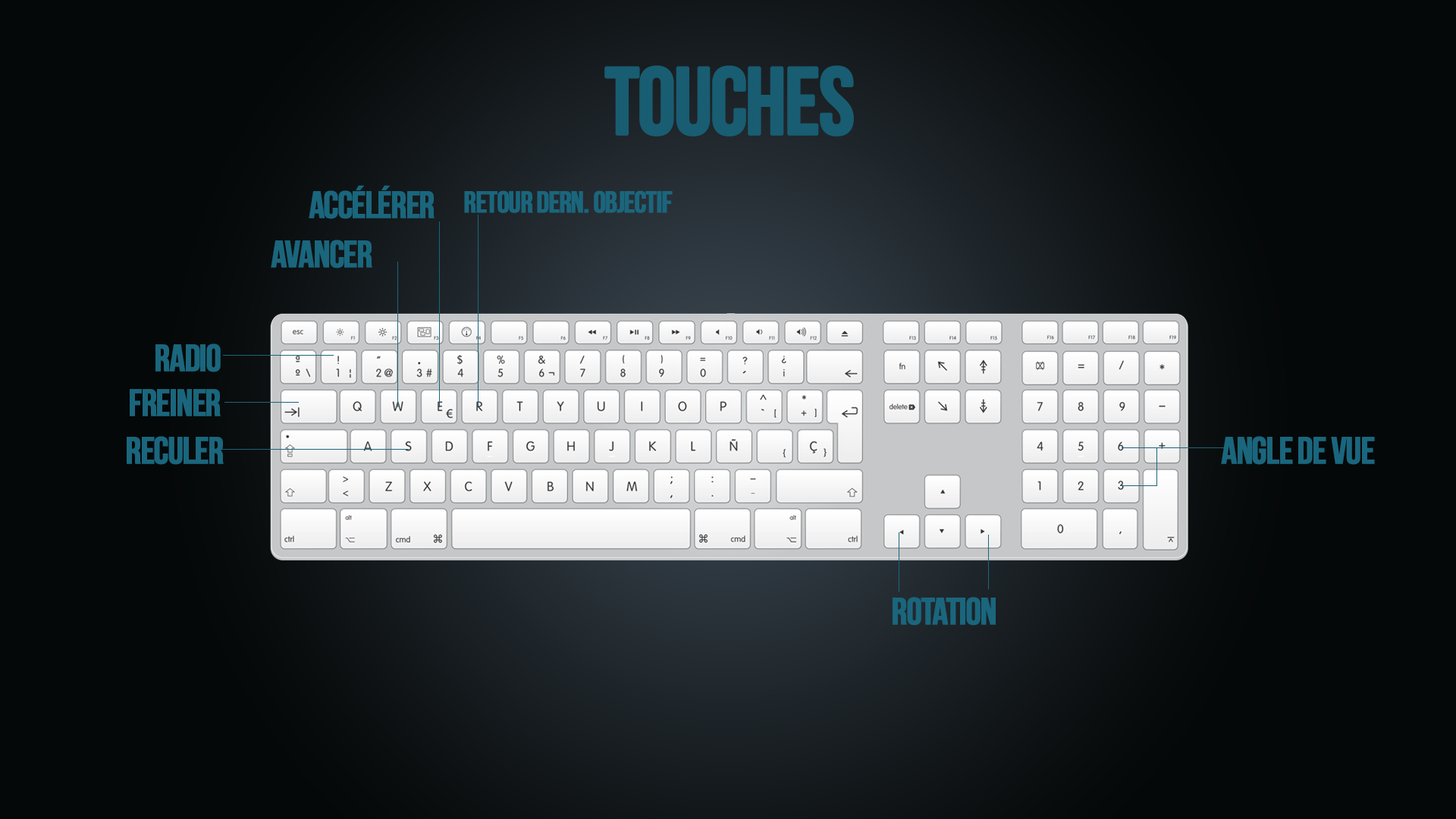
<style>
.page{position:relative;width:1456px;height:819px;background:#050809}
.page>*{position:absolute;margin:0}
.t1{font:95.1px "BebasNeue";letter-spacing:-0.04em;color:#185d72;font-weight:bold}
.t2{font:37.9px "BebasNeue";letter-spacing:-0.04em;color:#1a667d;font-weight:bold}
.t3{font:30.3px "BebasNeue";letter-spacing:-0.04em;color:#1a667d;font-weight:bold}
</style>
<div class="page">
<p class="t1" style="left:604px;top:65px;width:250px;height:71px">TOUCHES</p>
<p class="t2" style="left:309px;top:185px;width:126px;height:34px">Accélérer</p>
<p class="t3" style="left:464px;top:190px;width:209px;height:23px">Retour Dern. Objectif</p>
<p class="t2" style="left:271px;top:240px;width:101px;height:28px">Avancer</p>
<p class="t2" style="left:155px;top:344px;width:66px;height:28px">Radio</p>
<p class="t2" style="left:130px;top:389px;width:91px;height:27px">Freiner</p>
<p class="t2" style="left:127px;top:436px;width:97px;height:29px">Reculer</p>
<p class="t2" style="left:1221px;top:436px;width:154px;height:29px">Angle de vue</p>
<p class="t2" style="left:893px;top:597px;width:103px;height:29px">Rotation</p>
</div>
